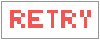
<style>
.page{position:relative;width:100px;height:40px;background:#ffffff}
.page>*{position:absolute;margin:0}
.t1{font:18.2px "CG-pixel-4x5";color:#f15655}
</style>
<div class="page">
<p class="t1" style="left:10px;top:10px;width:81px;height:18px">retry</p>
</div>
